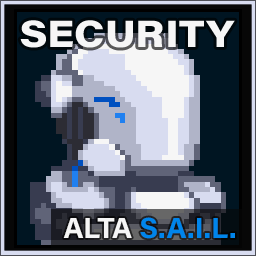
<style>
.page{position:relative;width:256px;height:256px;background:#001522}
.page>*{position:absolute;margin:0}
.t1{font:37.5px "AcuminConcept_760.000wght_112.000wdth";color:#f6f6f6}
.t2{font:29.2px "AcuminConcept-Bold";color:#0085eb}
.t3{font:29.2px "AcuminConcept-Bold";color:#f6f6f6}
</style>
<div class="page">
<p class="t1" style="left:20px;top:20px;width:215px;height:28px">SECURITY</p>
<p class="t2" style="left:63px;top:217px;width:172px;height:22px"><span class="t3">ALTA </span>S.A.I.L.</p>
</div>
